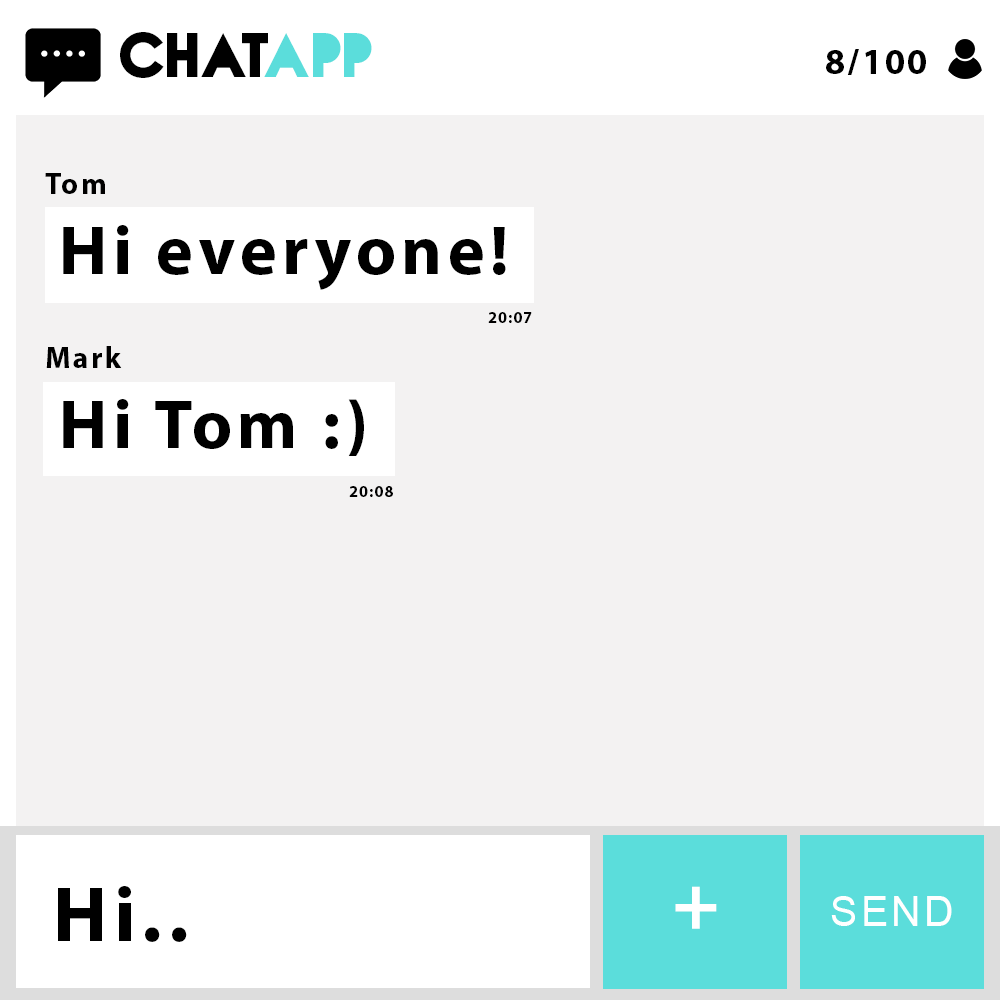
<style>
.page{position:relative;width:1000px;height:1000px;background:#f3f2f2}
.page>*{position:absolute;margin:0}
.t1{font:78px "NovaSOLID-SOLID";letter-spacing:0.075em;color:#000000}
.t2{font:78px "NovaSOLID-SOLID";letter-spacing:0.075em;color:#5bdddb}
.t3{font:36px "MyriadPro-Bold";letter-spacing:0.075em;color:#000000}
.t4{font:30px "MyriadPro-Bold";letter-spacing:0.075em;color:#000000}
.t5{font:70px "MyriadPro-Bold";letter-spacing:0.075em;color:#000000}
.t6{font:16px "MyriadPro-Bold";letter-spacing:0.075em;color:#000000}
.t7{font:79px "MyriadPro-Bold";letter-spacing:0.075em;color:#000000}
.t8{font:79px "MyriadPro-Bold";letter-spacing:0.075em;color:#ffffff}
.t9{font:41px "ArialMT";letter-spacing:0.075em;color:#ffffff}
</style>
<div class="page">
<p class="t1" style="left:120px;top:32px;width:252px;height:46px">CHAT<span class="t2">APP</span></p>
<p class="t3" style="left:826px;top:49px;width:100px;height:26px">8/100</p>
<p class="t4" style="left:45px;top:173px;width:60px;height:21px">Tom</p>
<p class="t5" style="left:63px;top:225px;width:443px;height:65px">Hi everyone!</p>
<p class="t6" style="left:488px;top:312px;width:44px;height:11px">20:07</p>
<p class="t4" style="left:46px;top:346px;width:76px;height:22px">Mark</p>
<p class="t5" style="left:63px;top:399px;width:301px;height:57px">Hi Tom :)</p>
<p class="t6" style="left:349px;top:486px;width:44px;height:11px">20:08</p>
<p class="t7" style="left:58px;top:886px;width:129px;height:56px">Hi..</p>
<p class="t8" style="left:675px;top:886px;width:42px;height:43px">+</p>
<p class="t9" style="left:831px;top:896px;width:121px;height:30px">SEND</p>
</div>
